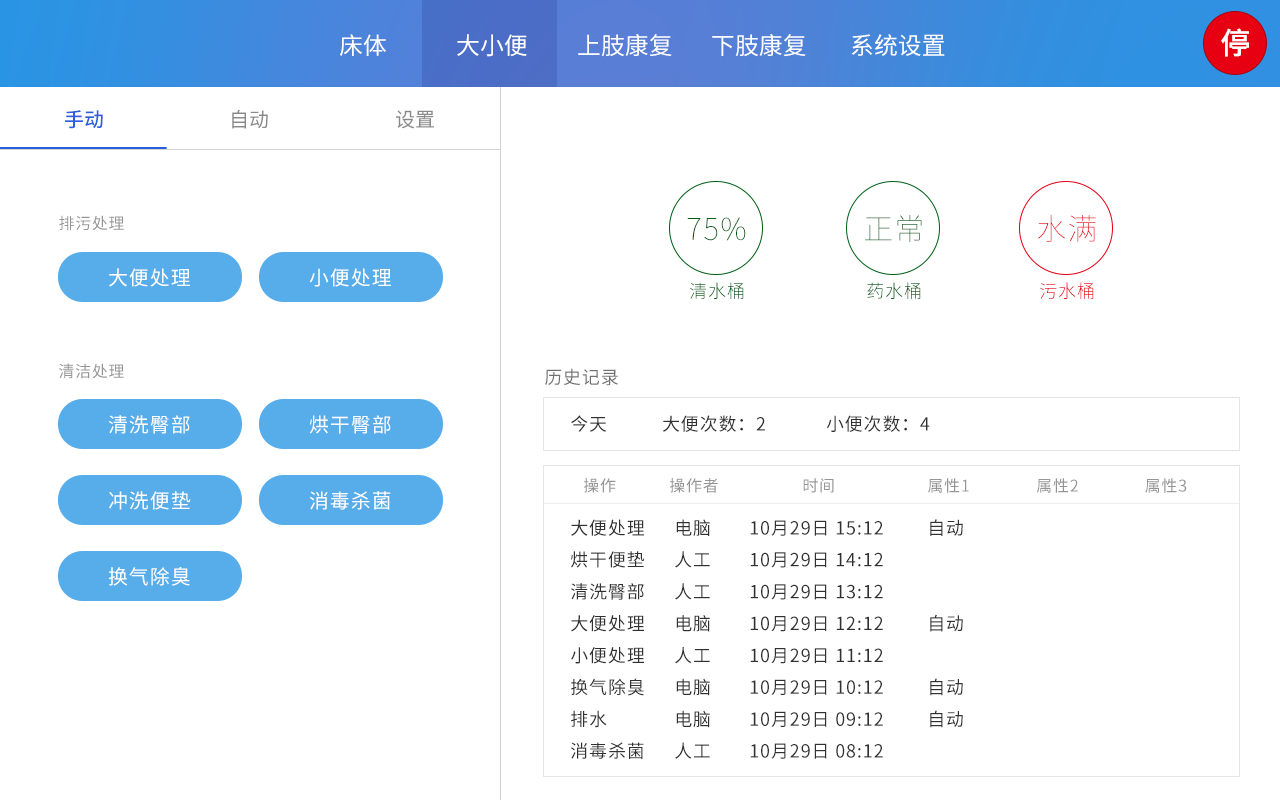
<style>
.page{position:relative;width:1280px;height:800px;background:#ffffff}
.page>*{position:absolute;margin:0}
.t1{font:29.9px "SourceHanSansCN-Medium";color:#ffffff}
.t2{font:23.9px "SourceHanSansCN-Regular";color:#ffffff}
.t3{font:19.9px "SourceHanSansCN-Medium";color:#2960dc}
.t4{font:19.9px "SourceHanSansCN-Regular";color:#898989}
.t5{font:15.9px "SourceHanSansCN-Regular";letter-spacing:0.05em;color:#959595}
.t6{font:29.9px "SourceHanSansCN-ExtraLight";letter-spacing:0.05em;color:#005e15}
.t7{font:29.9px "SourceHanSansCN-ExtraLight";letter-spacing:0.05em}
.t8{font:29.9px "SourceHanSansCN-ExtraLight";letter-spacing:0.05em;color:#e60012}
.t9{font:19.9px "SourceHanSansCN-Regular";letter-spacing:0.05em;color:#ffffff}
.t10{font:17.9px "SourceHanSansCN-Light";letter-spacing:0.05em;color:#005e15}
.t11{font:17.9px "SourceHanSansCN-Light";letter-spacing:0.05em;color:#e60012}
.t12{font:17.9px "SourceHanSansCN-Regular";letter-spacing:0.05em;color:#707070}
.t13{font:17.9px "SourceHanSansCN-Regular";letter-spacing:0.05em;color:#313131}
.t14{font:17.9px/31.9px "SourceHanSansCN-Regular";letter-spacing:0.05em;color:#313131}
</style>
<div class="page">
<p class="t1" style="left:1221px;top:28px;width:28px;height:29px">停</p>
<p class="t2" style="left:340px;top:34px;width:46px;height:22px">床体</p>
<p class="t2" style="left:457px;top:34px;width:70px;height:23px">大小便</p>
<p class="t2" style="left:578px;top:34px;width:94px;height:23px">上肢康复</p>
<p class="t2" style="left:712px;top:34px;width:94px;height:23px">下肢康复</p>
<p class="t2" style="left:851px;top:34px;width:94px;height:22px">系统设置</p>
<p class="t3" style="left:65px;top:110px;width:38px;height:19px">手动</p>
<p class="t4" style="left:232px;top:109px;width:36px;height:20px">自动</p>
<p class="t4" style="left:396px;top:110px;width:38px;height:19px">设置</p>
<p class="t5" style="left:59px;top:215px;width:65px;height:16px">排污处理</p>
<p class="t6" style="left:687px;top:217px;width:59px;height:24px">75%</p>
<p class="t7" style="left:865px;top:215px;width:57px;height:27px">正常</p>
<p class="t8" style="left:1038px;top:215px;width:58px;height:27px">水满</p>
<p class="t9" style="left:109px;top:268px;width:81px;height:19px">大便处理</p>
<p class="t9" style="left:309px;top:268px;width:82px;height:19px">小便处理</p>
<p class="t10" style="left:690px;top:282px;width:54px;height:17px">清水桶</p>
<p class="t10" style="left:867px;top:282px;width:54px;height:17px">药水桶</p>
<p class="t11" style="left:1040px;top:282px;width:54px;height:17px">污水桶</p>
<p class="t5" style="left:59px;top:363px;width:65px;height:16px">清洁处理</p>
<p class="t12" style="left:545px;top:368px;width:73px;height:18px">历史记录</p>
<p class="t9" style="left:108px;top:415px;width:82px;height:19px">清洗臀部</p>
<p class="t9" style="left:309px;top:415px;width:82px;height:19px">烘干臀部</p>
<p class="t13" style="left:571px;top:415px;width:359px;height:17px">今天           大便次数：2            小便次数：4</p>
<p class="t5" style="left:583px;top:478px;width:604px;height:15px">操作            操作者                   时间                     属性1               属性2               属性3</p>
<p class="t9" style="left:109px;top:491px;width:82px;height:19px">冲洗便垫</p>
<p class="t9" style="left:309px;top:491px;width:82px;height:19px">消毒杀菌</p>
<p class="t14" style="left:571px;top:519px;width:74px;height:240px">大便处理<br>烘干便垫<br>清洗臀部<br>大便处理<br>小便处理<br>换气除臭<br>排水<br>消毒杀菌</p>
<p class="t14" style="left:675px;top:519px;width:35px;height:240px">电脑<br>人工<br>人工<br>电脑<br>人工<br>电脑<br>电脑<br>人工</p>
<p class="t14" style="left:750px;top:520px;width:133px;height:239px">10月29日 15:12<br>10月29日 14:12<br>10月29日 13:12<br>10月29日 12:12<br>10月29日 11:12<br>10月29日 10:12<br>10月29日 09:12<br>10月29日 08:12</p>
<p class="t14" style="left:930px;top:519px;width:33px;height:209px">自动<br><br><br>自动<br><br>自动<br>自动</p>
<p class="t9" style="left:108px;top:567px;width:82px;height:19px">换气除臭</p>
</div>
